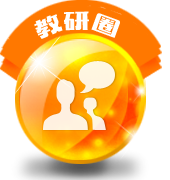
<style>
.page{position:relative;width:170px;height:180px;background:#ffffff}
.page>*{position:absolute;margin:0}
.t1{font:27.2px "MFWenYan_Noncommercial-Regular";color:#ffffff}
</style>
<div class="page">
<p class="t1" style="left:34px;top:11px;width:86px;height:28px;rotate:-2deg">教研圈</p>
</div>
